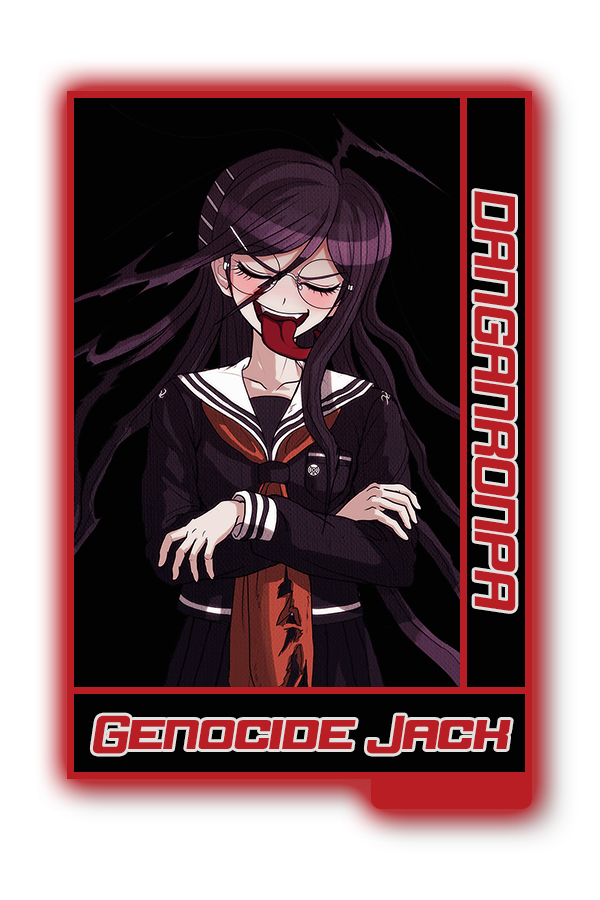
<style>
.page{position:relative;width:600px;height:900px;background:#020202}
.page>*{position:absolute;margin:0}
.t1{font:48.8px "DorBlue";color:#bb2c2e}
.t2{font:45.6px "DorBlue";color:#bb2c2e}
</style>
<div class="page">
<p class="t1" style="left:474px;top:191px;width:42px;height:420px;rotate:90deg">DANGANRONPA</p>
<p class="t2" style="left:92px;top:715px;width:419px;height:39px">Genocide Jack</p>
</div>
